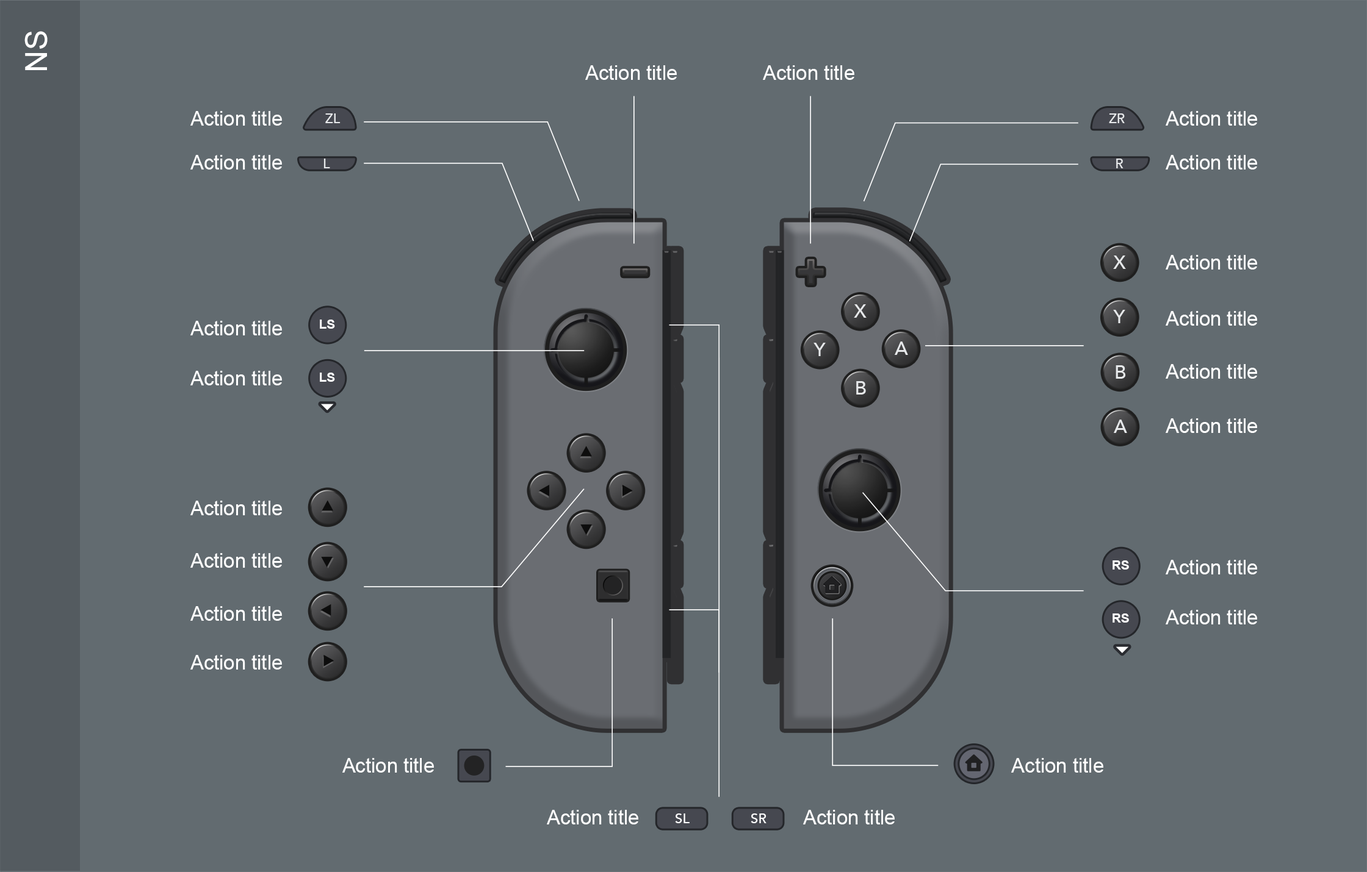
<style>
.page{position:relative;width:1367px;height:872px;background:#626b70}
.page>*{position:absolute;margin:0}
.t1{font:30.5px "ArialMT";color:#ffffff}
.t2{font:20px "ArialMT";color:#ffffff}
.t3{font:13.3px "Avenir-Medium";color:#e7e9eb}
.t4{font:18.9px "Avenir-Medium";color:#e7e9eb}
.t5{font:12.8px "Arial-BoldMT";color:#ffffff}
.t6{font:13.6px "Avenir-Medium";color:#ffffff}
</style>
<div class="page">
<p class="t1" style="left:24px;top:31px;width:24px;height:39px;rotate:-90deg">NS</p>
<p class="t2" style="left:585px;top:65px;width:92px;height:15px">Action title</p>
<p class="t2" style="left:763px;top:65px;width:91px;height:15px">Action title</p>
<p class="t2" style="left:190px;top:111px;width:92px;height:15px">Action title</p>
<p class="t3" style="left:325px;top:113px;width:15px;height:10px">ZL</p>
<p class="t3" style="left:1109px;top:113px;width:15px;height:10px">ZR</p>
<p class="t2" style="left:1165px;top:111px;width:92px;height:15px">Action title</p>
<p class="t2" style="left:190px;top:155px;width:92px;height:15px">Action title</p>
<p class="t3" style="left:323px;top:159px;width:7px;height:9px">L</p>
<p class="t3" style="left:1116px;top:159px;width:7px;height:9px">R</p>
<p class="t2" style="left:1165px;top:155px;width:92px;height:15px">Action title</p>
<p class="t4" style="left:1113px;top:256px;width:13px;height:13px">X</p>
<p class="t2" style="left:1165px;top:255px;width:92px;height:15px">Action title</p>
<p class="t4" style="left:854px;top:304px;width:12px;height:14px">X</p>
<p class="t4" style="left:1113px;top:310px;width:12px;height:13px">Y</p>
<p class="t2" style="left:1165px;top:311px;width:92px;height:15px">Action title</p>
<p class="t2" style="left:190px;top:321px;width:92px;height:15px">Action title</p>
<p class="t5" style="left:320px;top:320px;width:15px;height:9px">LS</p>
<p class="t4" style="left:894px;top:342px;width:14px;height:13px">A</p>
<p class="t4" style="left:813px;top:343px;width:13px;height:13px">Y</p>
<p class="t4" style="left:1115px;top:365px;width:11px;height:14px">B</p>
<p class="t2" style="left:1165px;top:364px;width:92px;height:15px">Action title</p>
<p class="t2" style="left:190px;top:371px;width:92px;height:15px">Action title</p>
<p class="t5" style="left:320px;top:373px;width:15px;height:9px">LS</p>
<p class="t4" style="left:856px;top:381px;width:10px;height:14px">B</p>
<p class="t4" style="left:1113px;top:420px;width:14px;height:13px">A</p>
<p class="t2" style="left:1165px;top:419px;width:92px;height:14px">Action title</p>
<p class="t2" style="left:190px;top:501px;width:92px;height:15px">Action title</p>
<p class="t2" style="left:190px;top:553px;width:92px;height:15px">Action title</p>
<p class="t5" style="left:1112px;top:561px;width:17px;height:9px">RS</p>
<p class="t2" style="left:1165px;top:560px;width:92px;height:15px">Action title</p>
<p class="t2" style="left:190px;top:606px;width:92px;height:15px">Action title</p>
<p class="t5" style="left:1112px;top:614px;width:17px;height:9px">RS</p>
<p class="t2" style="left:1165px;top:610px;width:92px;height:15px">Action title</p>
<p class="t2" style="left:190px;top:655px;width:92px;height:15px">Action title</p>
<p class="t2" style="left:342px;top:758px;width:92px;height:15px">Action title</p>
<p class="t2" style="left:1011px;top:758px;width:92px;height:15px">Action title</p>
<p class="t2" style="left:547px;top:810px;width:91px;height:15px">Action title</p>
<p class="t6" style="left:675px;top:814px;width:14px;height:10px">SL</p>
<p class="t6" style="left:750px;top:814px;width:16px;height:10px">SR</p>
<p class="t2" style="left:803px;top:810px;width:91px;height:15px">Action title</p>
</div>
